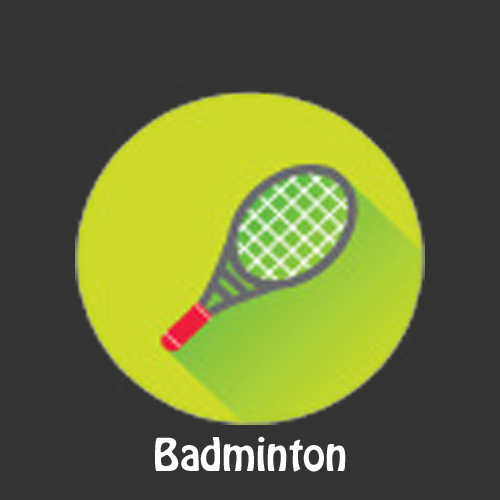
<style>
.page{position:relative;width:500px;height:500px;background:#333333}
.page>*{position:absolute;margin:0}
.t1{font:40px "HoboStd";color:#fefefe}
</style>
<div class="page">
<p class="t1" style="left:155px;top:436px;width:191px;height:36px">Badminton</p>
</div>
